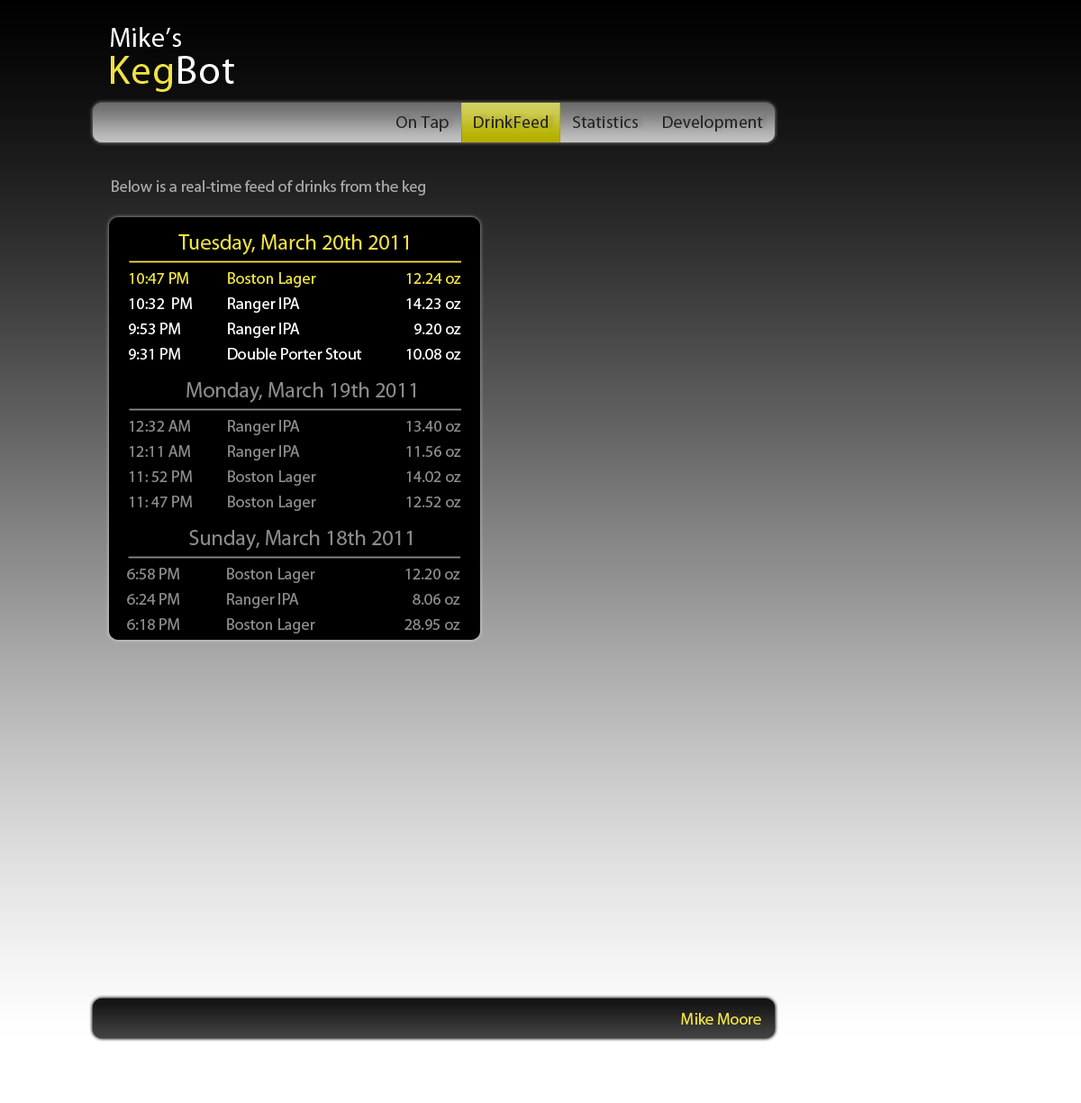
<style>
.page{position:relative;width:1081px;height:1103px}
.page>*{position:absolute;margin:0}
.t1{font:16.2px "MyriadPro-Regular";color:#a7a7a7}
.t2{font:21.6px "MyriadPro-Regular";color:#f0e244}
.t3{font:16.2px/25.2px "MyriadPro-Regular";color:#ffffff}
.t4{font:16.2px/25.2px "MyriadPro-Regular";color:#f0e244}
.t5{font:21.6px "MyriadPro-Regular";color:#8b8b8b}
.t6{font:16.2px/25.2px "MyriadPro-Regular";color:#8b8b8b}
.t7{font:16.2px "MyriadPro-Regular";color:#f0e244}
</style>
<div class="page">
<p class="t1" style="left:112px;top:180px;width:313px;height:16px">Below is a real-time feed of drinks from the keg</p>
<p class="t2" style="left:178px;top:234px;width:230px;height:21px">Tuesday, March 20th 2011</p>
<p class="t3" style="left:129px;top:272px;width:63px;height:88px"><span class="t4">10:47 PM<br></span>10:32  PM<br>9:53 PM<br>9:31 PM</p>
<p class="t3" style="left:228px;top:272px;width:134px;height:88px"><span class="t4">Boston Lager<br></span>Ranger IPA<br>Ranger IPA<br>Double Porter Stout</p>
<p class="t3" style="left:406px;top:273px;width:55px;height:87px;text-align:right"><span class="t4">12.24 oz<br></span>14.23 oz<br>9.20 oz<br>10.08 oz</p>
<p class="t5" style="left:187px;top:382px;width:228px;height:21px">Monday, March 19th 2011</p>
<p class="t6" style="left:130px;top:420px;width:62px;height:87px">12:32 AM<br>12:11 AM<br>11: 52 PM<br>11: 47 PM</p>
<p class="t6" style="left:228px;top:420px;width:88px;height:91px">Ranger IPA<br>Ranger IPA<br>Boston Lager<br>Boston Lager</p>
<p class="t6" style="left:406px;top:421px;width:55px;height:86px;text-align:right">13.40 oz<br>11.56 oz<br>14.02 oz<br>12.52 oz</p>
<p class="t5" style="left:189px;top:530px;width:223px;height:21px">Sunday, March 18th 2011</p>
<p class="t6" style="left:127px;top:568px;width:52px;height:62px">6:58 PM<br>6:24 PM<br>6:18 PM</p>
<p class="t6" style="left:227px;top:568px;width:88px;height:65px">Boston Lager<br>Ranger IPA<br>Boston Lager</p>
<p class="t6" style="left:405px;top:569px;width:55px;height:61px;text-align:right">12.20 oz<br>8.06 oz<br>28.95 oz</p>
<p class="t7" style="left:681px;top:1013px;width:80px;height:11px">Mike Moore</p>
</div>
